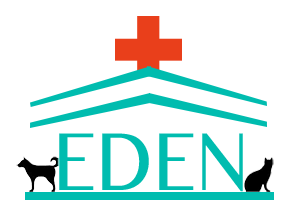
<style>
.page{position:relative;width:300px;height:200px;background:#ffffff}
.page>*{position:absolute;margin:0}
.t1{font:82.9px "MyanmarMN";color:#00bcaf;scale:0.87 1}
</style>
<div class="page">
<p class="t1" style="left:59px;top:133px;width:184px;height:59px">EDEN</p>
</div>
